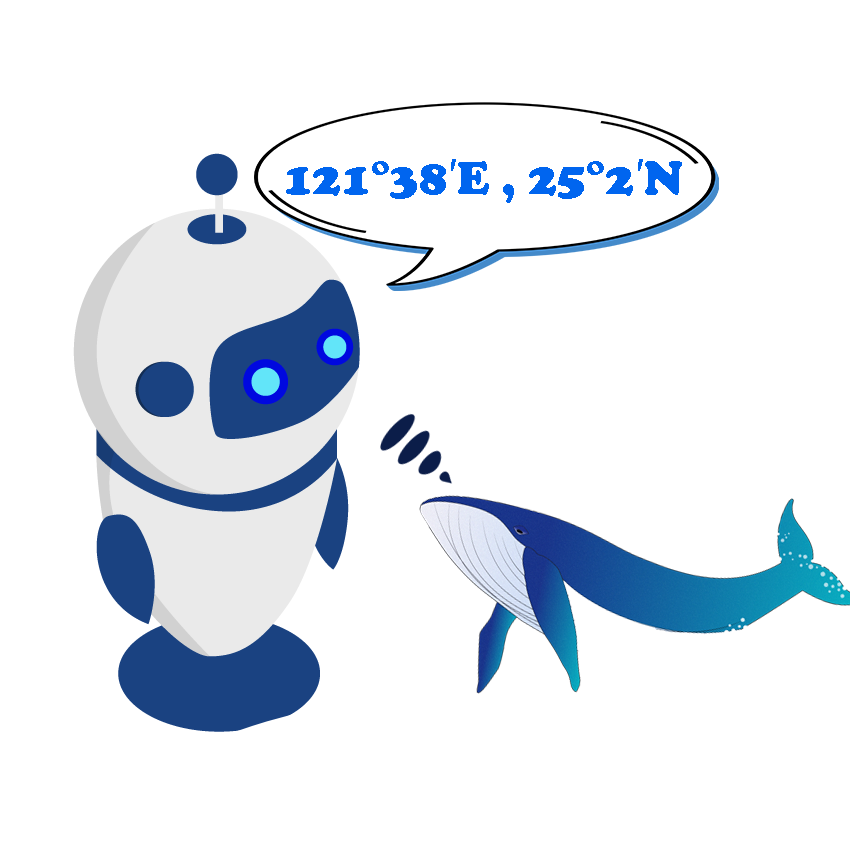
<style>
.page{position:relative;width:850px;height:850px;background:#ffffff}
.page>*{position:absolute;margin:0}
.t1{font:48px "CooperBlack";color:#0065ef}
.t2{font:48px "ArialMT";color:#0065ef}
</style>
<div class="page">
<p class="t1" style="left:286px;top:159px;width:396px;height:44px">121°38<span class="t2">′</span>E , 25°2<span class="t2">′</span>N</p>
</div>
